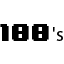
<style>
.page{position:relative;width:64px;height:64px;background:#ffffff}
.page>*{position:absolute;margin:0}
.t1{font:20px "8BITWONDERNominal";color:#000000}
.t2{font:20px "MyriadPro-Regular";color:#000000}
</style>
<div class="page">
<p class="t1" style="left:0px;top:24px;width:63px;height:17px">100<span class="t2">'s</span></p>
</div>
